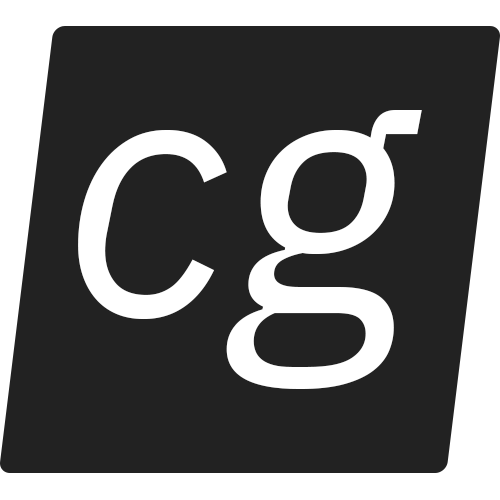
<style>
.page{position:relative;width:500px;height:500px;background:#222222}
.page>*{position:absolute;margin:0}
.t1{font:350px "IBMPlexSans-Italic";color:#ffffff}
</style>
<div class="page">
<p class="t1" style="left:78px;top:110px;width:344px;height:279px">cg</p>
</div>
